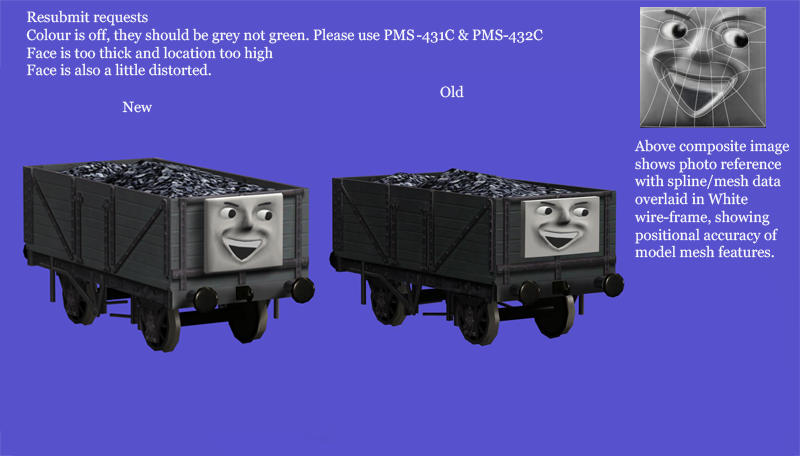
<style>
.page{position:relative;width:800px;height:456px;background:#5751cc}
.page>*{position:absolute;margin:0}
.t1{font:14.8px "Georgia";color:#fafafa}
</style>
<div class="page">
<p class="t1" style="left:26px;top:10px;width:517px;height:66px">Resubmit requests<br>Colour is off, they should be grey not green. Please use PMS -431C &amp; PMS-432C<br>Face is too thick and location too high<br>Face is also a little distorted.</p>
<p class="t1" style="left:440px;top:85px;width:24px;height:13px">Old</p>
<p class="t1" style="left:122px;top:101px;width:31px;height:12px">New</p>
<p class="t1" style="left:634px;top:139px;width:156px;height:119px">Above composite image<br>shows photo reference<br>with spline/mesh data<br>overlaid in White <br>wire-frame, showing <br>positional accuracy of<br>model mesh features.</p>
</div>
